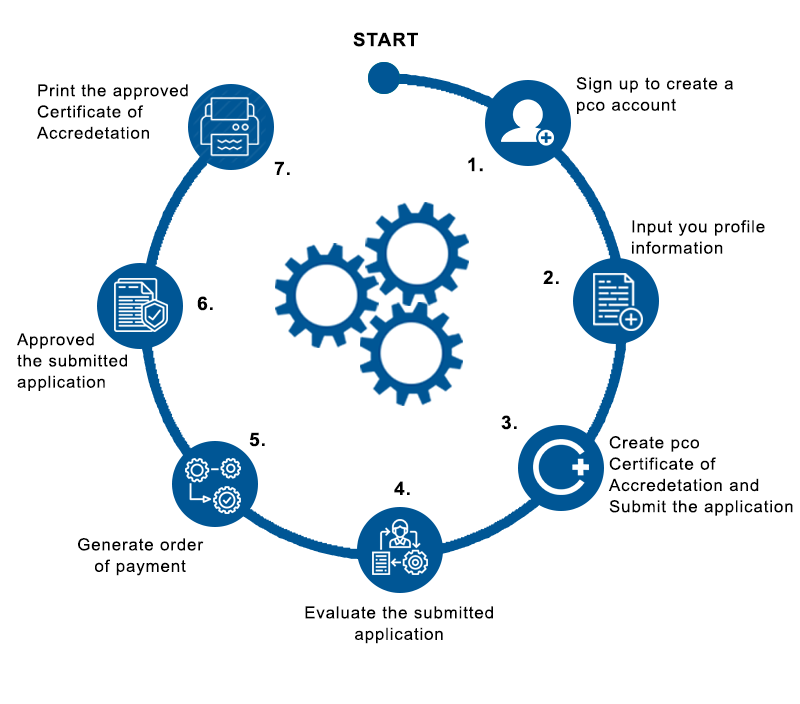
<style>
.page{position:relative;width:800px;height:704px;background:#ffffff}
.page>*{position:absolute;margin:0}
.t1{font:18.6px "Arial-BoldMT";letter-spacing:0.05em;color:#000000}
.t2{font:16.6px "ArialMT";letter-spacing:0.05em;color:#000000}
.t3{font:18.6px "Arial-BoldMT";letter-spacing:0.05em;color:#000000;scale:1.03 1}
.t4{font:16.7px "ArialMT";letter-spacing:0.05em;color:#000000}
</style>
<div class="page">
<p class="t1" style="left:353px;top:32px;width:65px;height:15px">START</p>
<p class="t2" style="left:576px;top:77px;width:157px;height:37px">Sign up to create a <br>pco account</p>
<p class="t2" style="left:37px;top:84px;width:151px;height:55px">Print the approved<br>Certificate of <br>Accredetation</p>
<p class="t3" style="left:274px;top:161px;width:16px;height:14px">7.</p>
<p class="t3" style="left:468px;top:157px;width:15px;height:15px">1.</p>
<p class="t2" style="left:632px;top:220px;width:133px;height:34px">Input you profile <br>information</p>
<p class="t3" style="left:543px;top:270px;width:16px;height:14px">2.</p>
<p class="t3" style="left:197px;top:296px;width:16px;height:15px">6.</p>
<p class="t2" style="left:17px;top:333px;width:110px;height:58px">Approved <br>the submitted<br>application</p>
<p class="t3" style="left:501px;top:415px;width:16px;height:15px">3.</p>
<p class="t3" style="left:249px;top:432px;width:16px;height:15px">5.</p>
<p class="t2" style="left:608px;top:436px;width:185px;height:80px">Create pco <br>Certificate of <br>Accredetation and<br>Submit the application</p>
<p class="t3" style="left:394px;top:481px;width:16px;height:14px">4.</p>
<p class="t4" style="left:78px;top:538px;width:126px;height:38px;text-align:center">Generate order<br>of payment</p>
<p class="t4" style="left:305px;top:606px;width:188px;height:38px;text-align:center">Evaluate the submitted<br>application</p>
</div>
